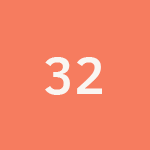
<style>
.page{position:relative;width:150px;height:150px;background:#f67c5f}
.page>*{position:absolute;margin:0}
.t1{font:52.9px "ClearSans-Medium";color:#f9f6f2}
</style>
<div class="page">
<p class="t1" style="left:45px;top:57px;width:57px;height:38px">32</p>
</div>
